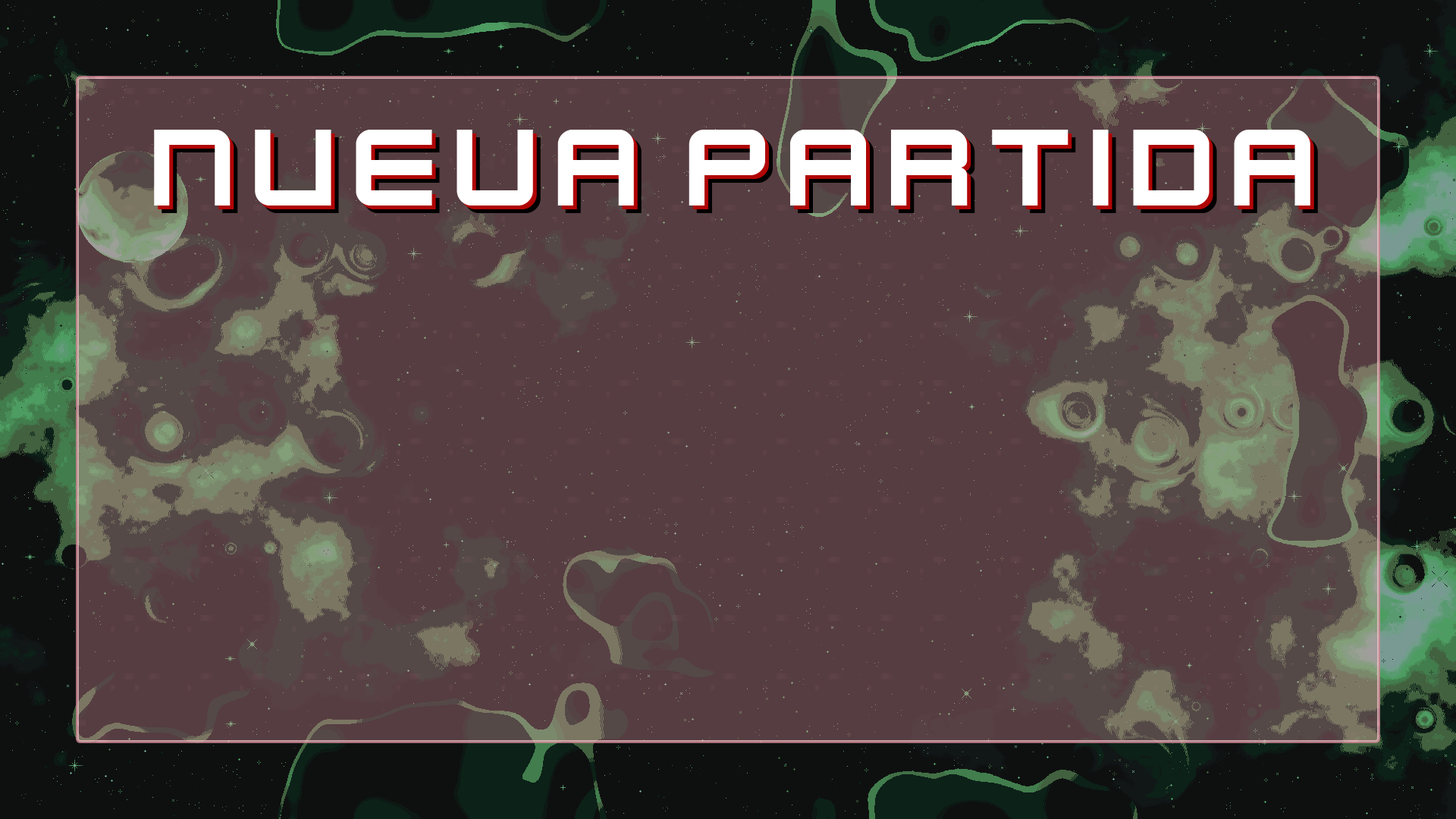
<style>
.page{position:relative;width:1456px;height:819px;background:#563d41}
.page>*{position:absolute;margin:0}
.t1{font:121.3px "KenVector-Future";color:#ffffff}
</style>
<div class="page">
<p class="t1" style="left:154px;top:130px;width:1156px;height:76px">nueva partida</p>
<p class="t1" style="left:158px;top:133px;width:1156px;height:76px">nueva partida</p>
</div>
